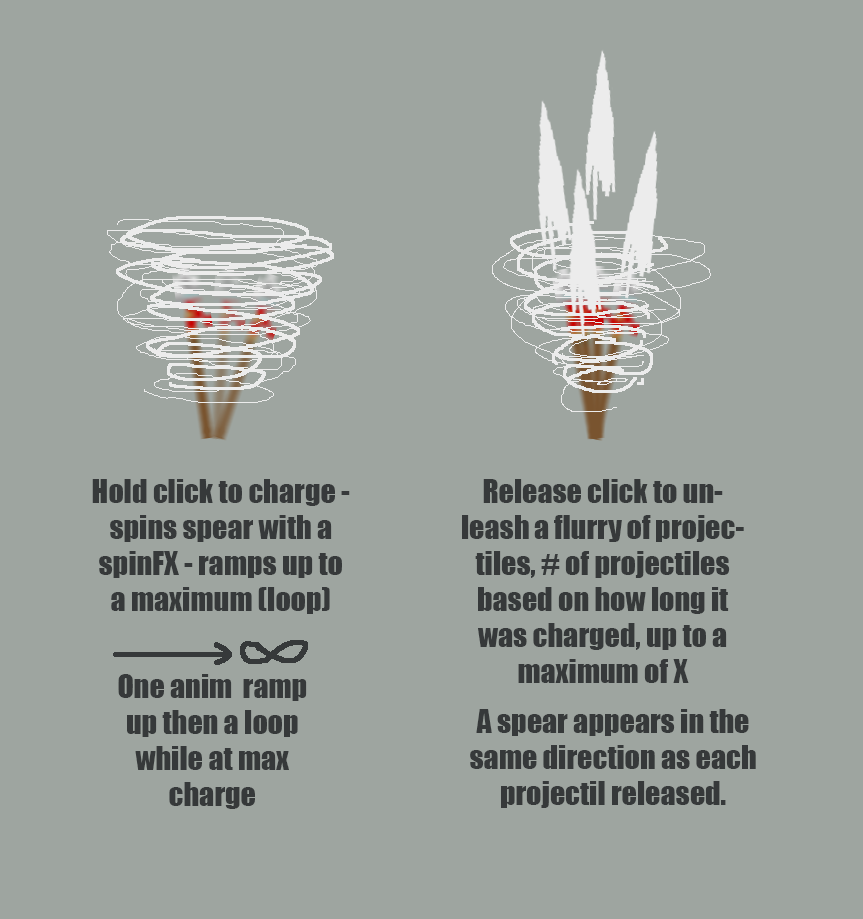
<style>
.page{position:relative;width:863px;height:919px;background:#9ea5a0}
.page>*{position:absolute;margin:0}
.t1{font:30px "Impact";color:#36393a}
</style>
<div class="page">
<p class="t1" style="left:92px;top:479px;width:258px;height:135px;text-align:center">Hold click to charge - spins spear with a spinFX - ramps up to a maximum (loop)</p>
<p class="t1" style="left:462px;top:479px;width:282px;height:204px;text-align:center">Release click to unleash a flurry of projectiles, # of projectiles based on how long it was charged, up to a maximum of X</p>
<p class="t1" style="left:118px;top:674px;width:189px;height:135px;text-align:center">One anim  ramp up then a loop while at max charge</p>
<p class="t1" style="left:470px;top:709px;width:286px;height:99px;text-align:center">A spear appears in the same direction as each projectil released.</p>
</div>
